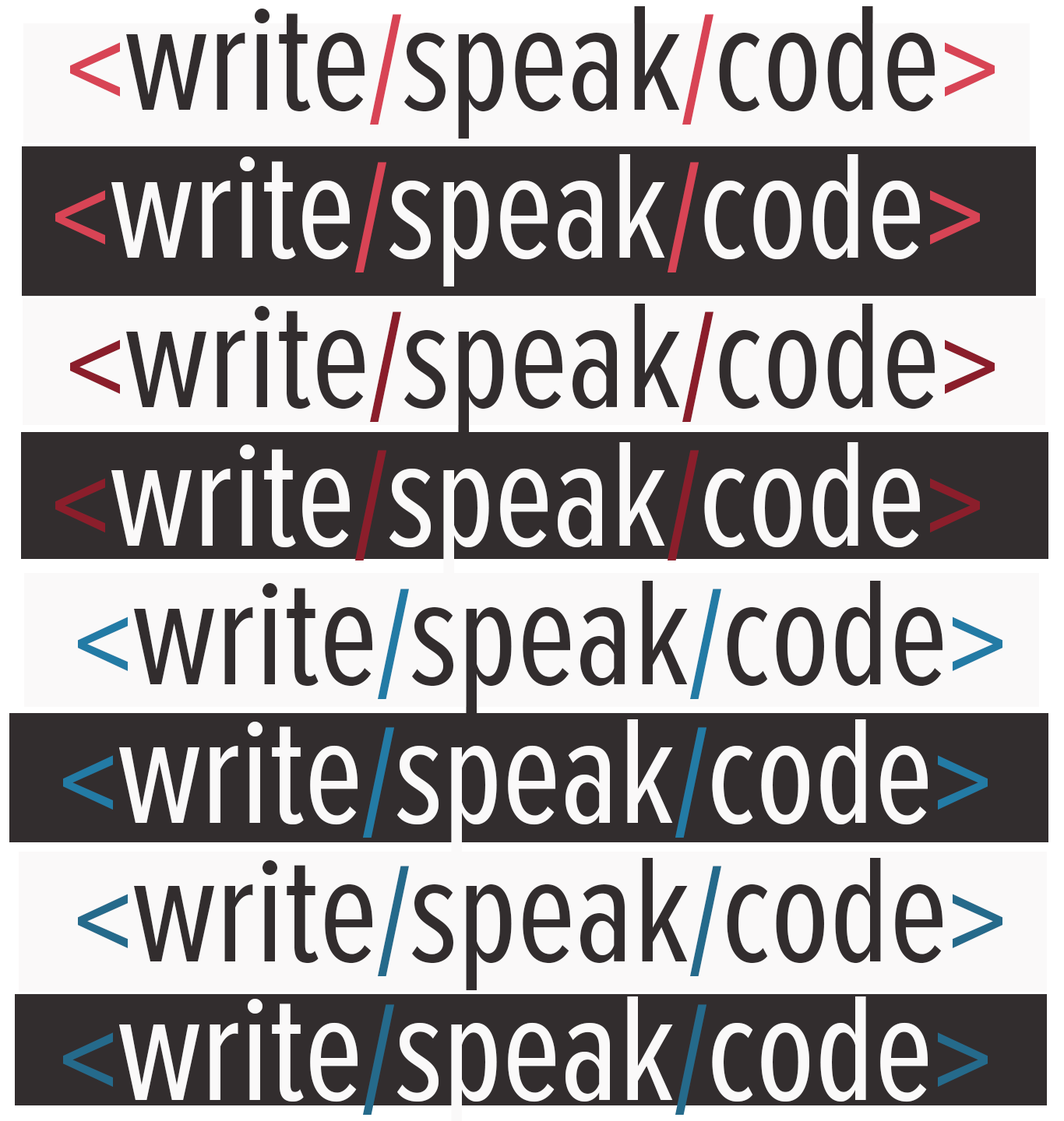
<style>
.page{position:relative;width:1064px;height:1121px;background:#faf9f9}
.page>*{position:absolute;margin:0}
.t1{font:155.7px "ProximaNovaExCn-Regular";color:#322d2e}
.t2{font:155.7px "ProximaNovaExCn-Regular";color:#d84455}
.t3{font:155.7px "ProximaNovaExCn-Regular";color:#faf9f9}
.t4{font:155.7px "ProximaNovaExCn-Regular";color:#8b1e2b}
.t5{font:155.7px "ProximaNovaExCn-Regular";color:#237ba5}
.t6{font:155.7px "ProximaNovaExCn-Regular";color:#256a8b}
</style>
<div class="page">
<p class="t1" style="left:70px;top:6px;width:924px;height:133px"><span class="t2">&lt;</span>write<span class="t2">/</span>speak<span class="t2">/</span>code<span class="t2">&gt;</span></p>
<p class="t3" style="left:55px;top:154px;width:924px;height:133px"><span class="t2">&lt;</span>write<span class="t2">/</span>speak<span class="t2">/</span>code<span class="t2">&gt;</span></p>
<p class="t1" style="left:70px;top:304px;width:924px;height:132px"><span class="t4">&lt;</span>write<span class="t4">/</span>speak<span class="t4">/</span>code<span class="t4">&gt;</span></p>
<p class="t3" style="left:55px;top:442px;width:924px;height:133px"><span class="t4">&lt;</span>write<span class="t4">/</span>speak<span class="t4">/</span>code<span class="t4">&gt;</span></p>
<p class="t1" style="left:78px;top:581px;width:924px;height:132px"><span class="t5">&lt;</span>write<span class="t5">/</span>speak<span class="t5">/</span>code<span class="t5">&gt;</span></p>
<p class="t3" style="left:63px;top:719px;width:924px;height:133px"><span class="t5">&lt;</span>write<span class="t5">/</span>speak<span class="t5">/</span>code<span class="t5">&gt;</span></p>
<p class="t1" style="left:78px;top:858px;width:924px;height:132px"><span class="t6">&lt;</span>write<span class="t6">/</span>speak<span class="t6">/</span>code<span class="t6">&gt;</span></p>
</div>
